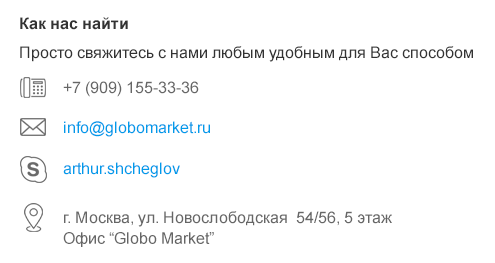
<style>
.page{position:relative;width:495px;height:263px;background:#ffffff}
.page>*{position:absolute;margin:0}
.t1{font:16px "Arial-BoldMT";color:#333333}
.t2{font:16px "ArialMT";color:#333333}
.t3{font:16px "ArialMT";color:#666666}
.t4{font:16px "ArialMT";color:#009bea}
.t5{font:16px/20.8px "ArialMT";color:#666666}
</style>
<div class="page">
<p class="t1" style="left:20px;top:17px;width:108px;height:13px">Как нас найти</p>
<p class="t2" style="left:20px;top:46px;width:453px;height:16px">Просто свяжитесь с нами любым удобным для Вас способом</p>
<p class="t3" style="left:63px;top:81px;width:136px;height:16px">+7 (909) 155-33-36</p>
<p class="t4" style="left:64px;top:121px;width:146px;height:16px">info@globomarket.ru</p>
<p class="t4" style="left:63px;top:162px;width:117px;height:16px">arthur.shcheglov</p>
<p class="t5" style="left:63px;top:211px;width:329px;height:36px">г. Москва, ул. Новослободская  54/56, 5 этаж<br>Офис “Globo Market”</p>
</div>
